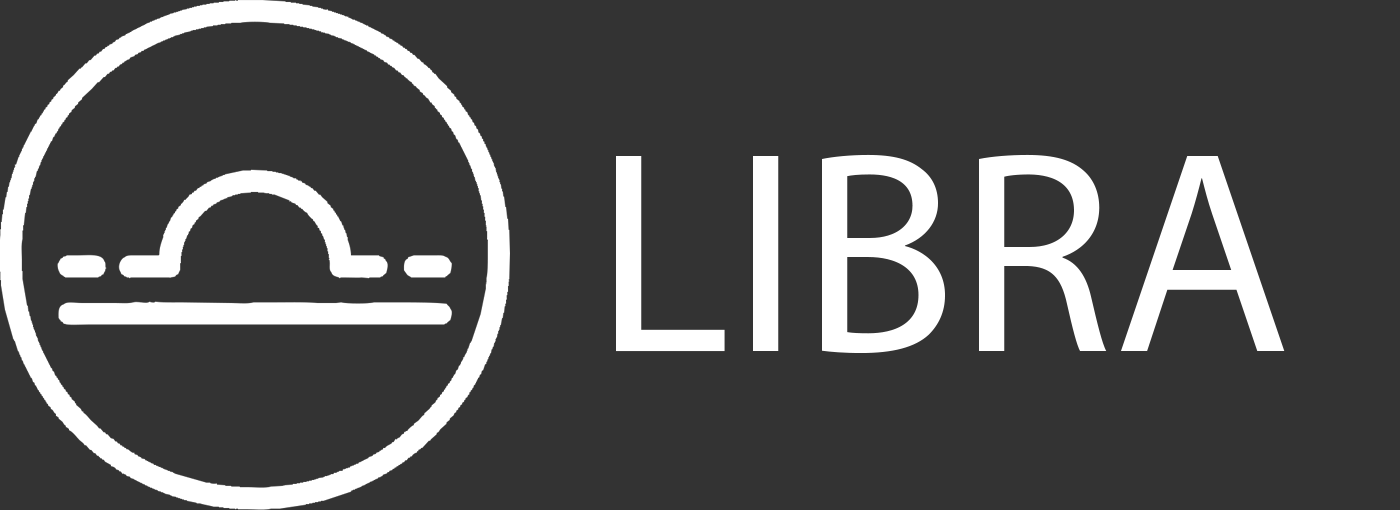
<style>
.page{position:relative;width:1400px;height:510px;background:#333333}
.page>*{position:absolute;margin:0}
.t1{font:289.4px "MyriadPro-Regular";color:#ffffff}
</style>
<div class="page">
<p class="t1" style="left:616px;top:154px;width:669px;height:200px">LIBRA</p>
</div>
